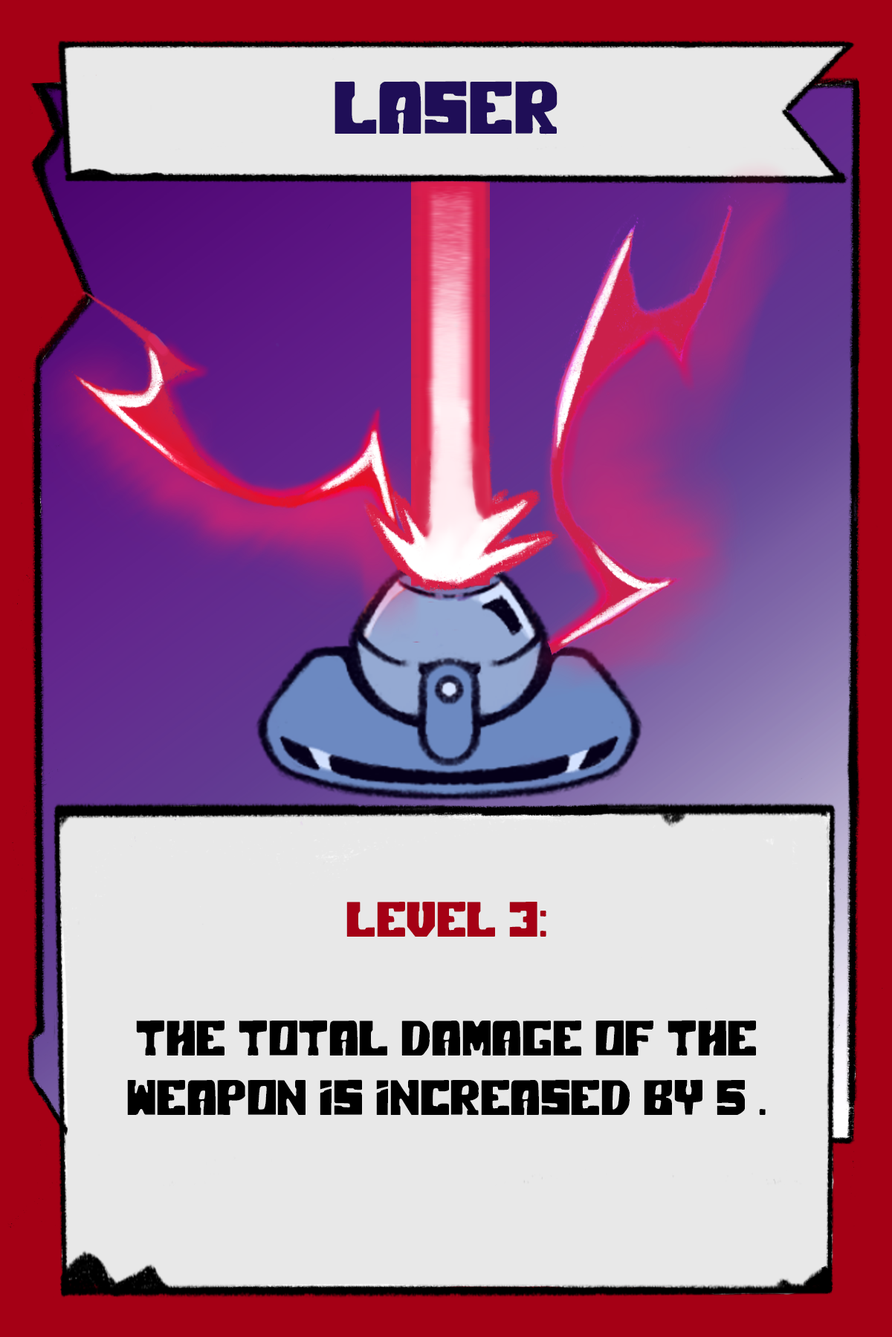
<style>
.page{position:relative;width:892px;height:1337px;background:#e8e8e8}
.page>*{position:absolute;margin:0}
.t1{font:74.3px "PolarPress";color:#1f0e57}
.t2{font:49.5px "PolarPress";color:#000000}
.t3{font:49.5px "PolarPress";color:#a50015}
</style>
<div class="page">
<p class="t1" style="left:334px;top:81px;width:223px;height:53px">LASER</p>
<p class="t2" style="left:127px;top:902px;width:638px;height:213px;text-align:center"><span class="t3">LEVEL 3:<br><br></span>The total damage of the weapon is increased by 5 .</p>
</div>
